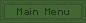
<style>
.page{position:relative;width:86px;height:23px;background:#436734}
.page>*{position:absolute;margin:0}
.t1{font:8px "Minecraftia";letter-spacing:0.06em;color:#213219}
</style>
<div class="page">
<p class="t1" style="left:17px;top:8px;width:52px;height:7px">Main Menu</p>
<p class="t1" style="left:17px;top:8px;width:52px;height:7px">Main Menu</p>
</div>
